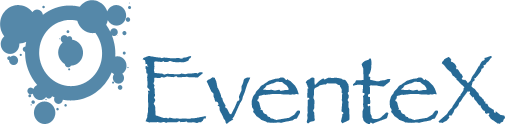
<style>
.page{position:relative;width:505px;height:124px;background:#ffffff}
.page>*{position:absolute;margin:0}
.t1{font:100px "Papyrus";letter-spacing:-0.02em;color:#276a96}
</style>
<div class="page">
<p class="t1" style="left:142px;top:56px;width:363px;height:68px">EventeX</p>
</div>
